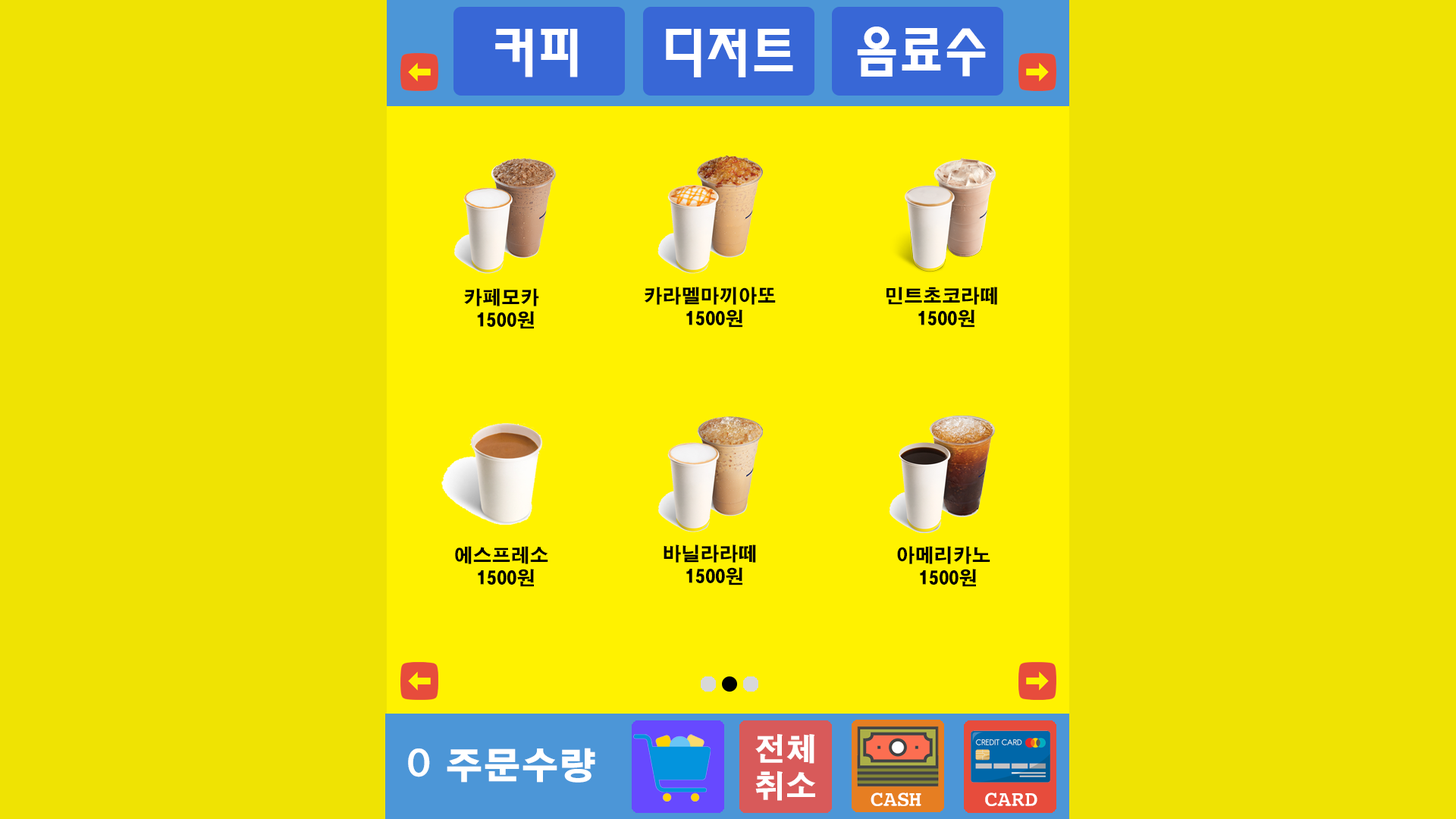
<style>
.page{position:relative;width:1456px;height:819px;background:#efe303}
.page>*{position:absolute;margin:0}
.t1{font:54.6px "MoeumTXB-HM";color:#ffffff}
.t2{font:19px "ÈÞ¸Õ°ßÃâ°íµñ";color:#000000}
.t3{font:31.1px "ÈÞ¸Õ°ßÃâ°íµñ";color:#ffffff}
.t4{font:37.9px "YDIYGO160-KSCPC-EUC-H";color:#ffffff}
.t5{font:37.9px "(ÇÑ)¹°¹æ¿ïB";color:#ffffff}
.t6{font:19px "(ÇÑ)¹°¹æ¿ïB";color:#ffffff}
</style>
<div class="page">
<p class="t1" style="left:495px;top:29px;width:83px;height:48px">커피</p>
<p class="t1" style="left:666px;top:29px;width:127px;height:48px">디저트</p>
<p class="t1" style="left:857px;top:27px;width:129px;height:50px">음료수</p>
<p class="t2" style="left:464px;top:288px;width:75px;height:41px;text-align:center">카페모카 <br>1500원</p>
<p class="t2" style="left:644px;top:287px;width:132px;height:41px;text-align:center">카라멜마끼아또<br> 1500원</p>
<p class="t2" style="left:886px;top:287px;width:112px;height:41px;text-align:center">민트초코라떼<br> 1500원</p>
<p class="t2" style="left:455px;top:546px;width:93px;height:41px;text-align:center">에스프레소<br> 1500원</p>
<p class="t2" style="left:664px;top:544px;width:92px;height:41px;text-align:center">바닐라라떼<br> 1500원</p>
<p class="t2" style="left:897px;top:546px;width:93px;height:41px;text-align:center">아메리카노<br> 1500원</p>
<p class="t3" style="left:755px;top:734px;width:61px;height:67px">전체<br>취소</p>
<p class="t4" style="left:408px;top:748px;width:187px;height:35px"><span class="t5">0 </span>주문수량</p>
<p class="t6" style="left:871px;top:792px;width:50px;height:14px">CASH</p>
<p class="t6" style="left:985px;top:792px;width:52px;height:14px">CARD</p>
</div>
